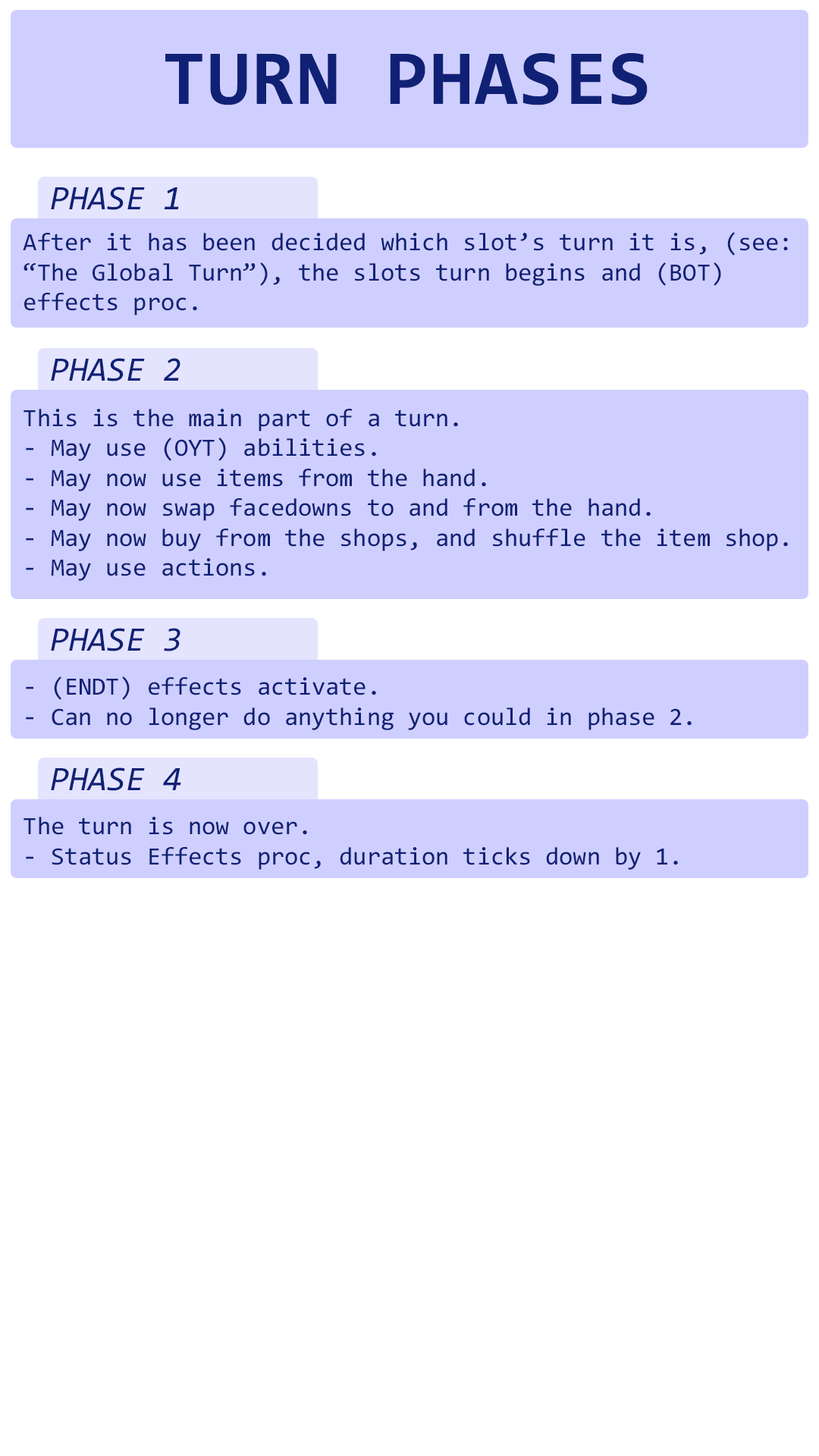
<style>
.page{position:relative;width:819px;height:1456px;background:#ffffff}
.page>*{position:absolute;margin:0}
.t1{font:78.3px "Consolas-Bold";letter-spacing:0.02em;color:#102175}
.t2{font:34.3px "Consolas-Italic";color:#102175}
.t3{font:25px "Consolas";color:#102175}
</style>
<div class="page">
<p class="t1" style="left:165px;top:53px;width:483px;height:52px">TURN PHASES</p>
<p class="t2" style="left:51px;top:187px;width:128px;height:23px">PHASE 1</p>
<p class="t3" style="left:23px;top:232px;width:765px;height:83px">After it has been decided which slot’s turn it is, (see: “The Global Turn”), the slots turn begins and (BOT) effects proc.</p>
<p class="t2" style="left:51px;top:358px;width:129px;height:23px">PHASE 2</p>
<p class="t3" style="left:24px;top:409px;width:764px;height:172px">This is the main part of a turn.<br>- May use (OYT) abilities.<br>- May now use items from the hand.<br>- May now swap facedowns to and from the hand.<br>- May now buy from the shops, and shuffle the item shop.<br>- May use actions.</p>
<p class="t2" style="left:51px;top:628px;width:129px;height:23px">PHASE 3</p>
<p class="t3" style="left:26px;top:676px;width:666px;height:54px">- (ENDT) effects activate.<br>- Can no longer do anything you could in phase 2.</p>
<p class="t2" style="left:51px;top:767px;width:130px;height:24px">PHASE 4</p>
<p class="t3" style="left:24px;top:817px;width:654px;height:53px">The turn is now over.<br>- Status Effects proc, duration ticks down by 1.</p>
</div>
